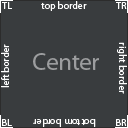
<style>
.page{position:relative;width:128px;height:128px;background:#393c3e}
.page>*{position:absolute;margin:0}
.t1{font:10px "MyriadPro-Regular";color:#ffffff}
.t2{font:10px "MyriadPro-Regular";color:#fefefe}
.t3{font:24px "MyriadPro-Regular";color:#9c9d9f}
</style>
<div class="page">
<p class="t1" style="left:2px;top:2px;width:10px;height:7px">TL</p>
<p class="t2" style="left:41px;top:1px;width:46px;height:10px">top border</p>
<p class="t1" style="left:116px;top:2px;width:11px;height:7px">TR</p>
<p class="t2" style="left:1px;top:44px;width:8px;height:44px;rotate:-90deg">left border</p>
<p class="t3" style="left:33px;top:53px;width:66px;height:17px">Center</p>
<p class="t2" style="left:117px;top:42px;width:10px;height:52px;rotate:90deg">right border</p>
<p class="t1" style="left:2px;top:119px;width:10px;height:7px">BL</p>
<p class="t2" style="left:33px;top:119px;width:63px;height:8px;rotate:180deg">bottom border</p>
<p class="t1" style="left:116px;top:119px;width:11px;height:7px">BR</p>
</div>
